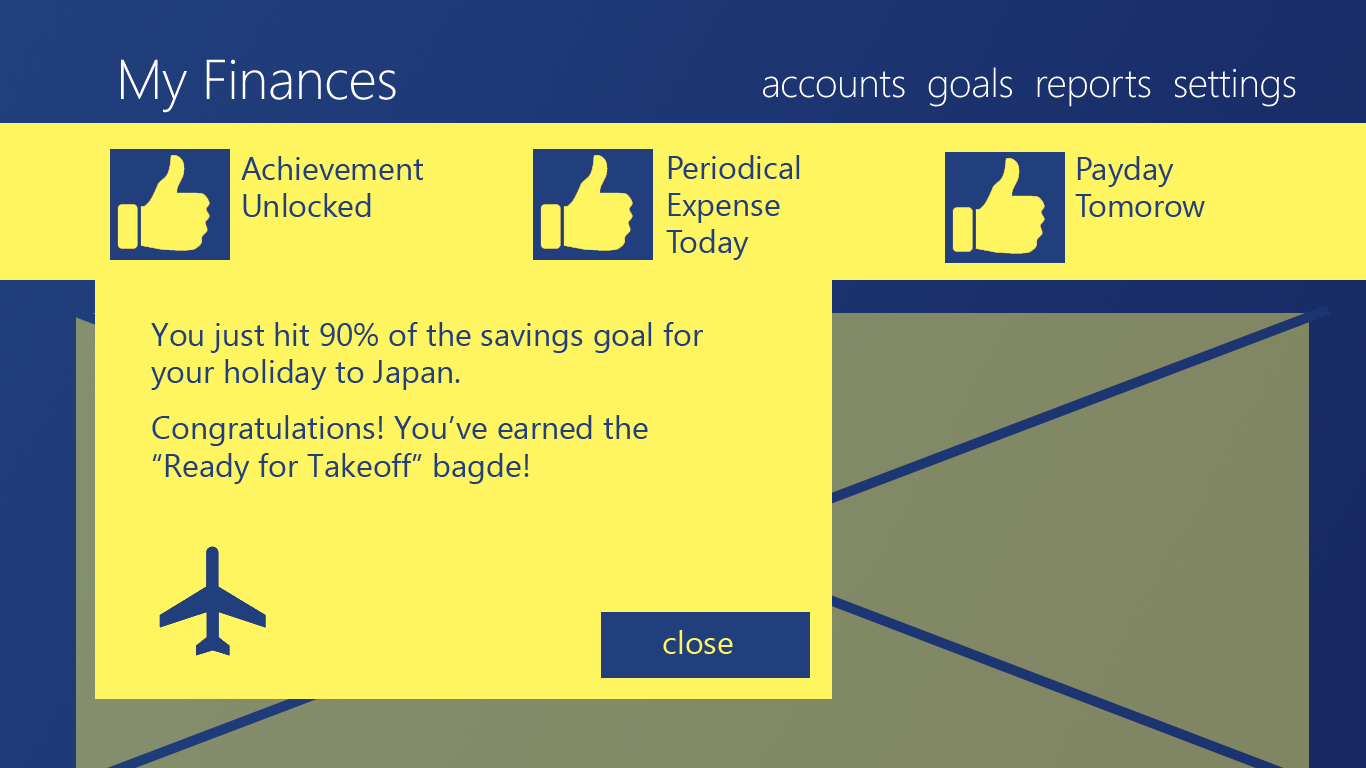
<style>
.page{position:relative;width:1366px;height:768px;background:#fff560}
.page>*{position:absolute;margin:0}
.t1{font:56px "SegoeUI-Light";letter-spacing:-0.01em;color:#ffffff}
.t2{font:40px "SegoeUI-Light";letter-spacing:-0.01em;color:#ffffff}
.t3{font:32px/18.7px "SegoeUI";color:#213f7d}
.t4{font:32px "SegoeUI";color:#fff560}
</style>
<div class="page">
<p class="t1" style="left:121px;top:59px;width:275px;height:54px">My Finances</p>
<p class="t2" style="left:763px;top:67px;width:533px;height:40px">accounts  goals  reports  settings</p>
<p class="t3" style="left:241px;top:156px;width:182px;height:61px">Achievement<br><br>Unlocked</p>
<p class="t3" style="left:666px;top:155px;width:134px;height:105px">Periodical<br><br>Expense<br><br>Today</p>
<p class="t3" style="left:1075px;top:156px;width:130px;height:61px">Payday<br><br>Tomorow</p>
<p class="t3" style="left:151px;top:322px;width:552px;height:162px">You just hit 90% of the savings goal for <br><br>your holiday to Japan.<br><br><br>Congratulations! You’ve earned the <br><br>“Ready for Takeoff” bagde!</p>
<p class="t4" style="left:663px;top:630px;width:70px;height:24px">close</p>
</div>
